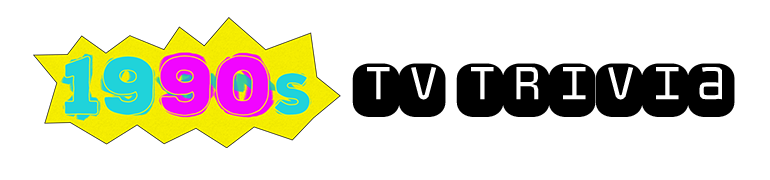
<style>
.page{position:relative;width:770px;height:180px;background:#ffffff}
.page>*{position:absolute;margin:0}
.t1{font:80px "Monofett";color:#000000}
</style>
<div class="page">
<p class="t1" style="left:352px;top:63px;width:383px;height:54px">TV Trivia</p>
</div>
